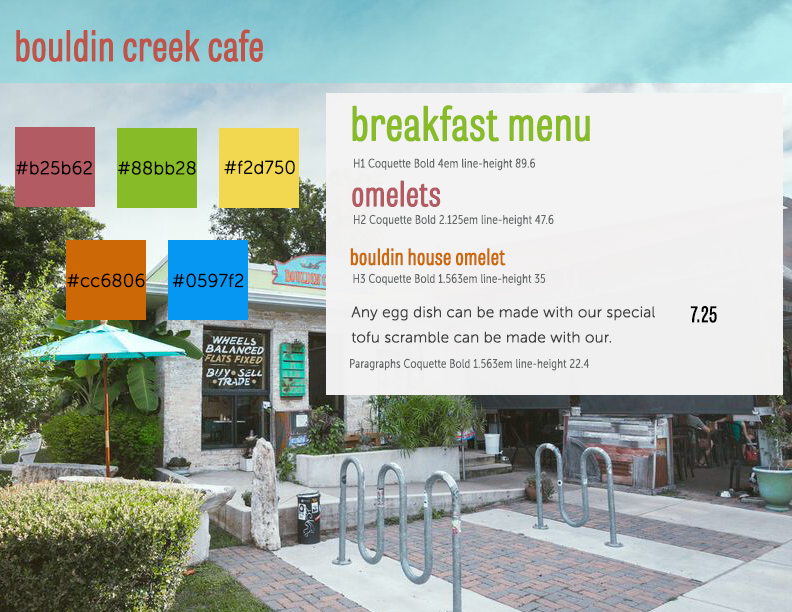
<style>
.page{position:relative;width:792px;height:612px}
.page>*{position:absolute;margin:0}
.t1{font:41px "TabletGothicCompressed-Light";letter-spacing:0.01em;color:#bf544b;font-weight:bold}
.t2{font:46px "TabletGothicCompressed-Light";letter-spacing:0.01em;color:#88bb28;font-weight:bold}
.t3{font:18px "MuseoSansRounded-100";letter-spacing:0.01em;color:#000000;font-weight:bold}
.t4{font:12px "MuseoSansCond-100";letter-spacing:0.01em;color:#646869;font-weight:bold}
.t5{font:34px "TabletGothicCompressed-Light";letter-spacing:0.01em;color:#b25b62;font-weight:bold}
.t6{font:22px "TabletGothicCompressed-Light";letter-spacing:0.01em;color:#cc6806;font-weight:bold}
.t7{font:15px/25.2px "MuseoSansRounded-100";letter-spacing:0.01em;color:#424242;font-weight:bold}
.t8{font:21px "TabletGothicCompressed-Light";letter-spacing:0.01em;color:#000000;font-weight:bold}
</style>
<div class="page">
<p class="t1" style="left:16px;top:29px;width:247px;height:33px">bouldin creek cafe</p>
<p class="t2" style="left:352px;top:105px;width:238px;height:37px">breakfast menu</p>
<p class="t3" style="left:16px;top:161px;width:76px;height:14px">#b25b62</p>
<p class="t3" style="left:118px;top:161px;width:78px;height:14px">#88bb28</p>
<p class="t3" style="left:224px;top:160px;width:71px;height:15px">#f2d750</p>
<p class="t4" style="left:354px;top:158px;width:181px;height:13px">H1 Coquette Bold 4em line-height 89.6</p>
<p class="t5" style="left:352px;top:180px;width:89px;height:27px">omelets</p>
<p class="t4" style="left:354px;top:214px;width:200px;height:13px">H2 Coquette Bold 2.125em line-height 47.6</p>
<p class="t6" style="left:350px;top:248px;width:156px;height:18px">bouldin house omelet</p>
<p class="t3" style="left:67px;top:273px;width:78px;height:15px">#cc6806</p>
<p class="t3" style="left:172px;top:273px;width:72px;height:15px">#0597f2</p>
<p class="t4" style="left:353px;top:273px;width:193px;height:13px">H3 Coquette Bold 1.563em line-height 35</p>
<p class="t7" style="left:351px;top:306px;width:304px;height:37px">Any egg dish can be made with our special<br>tofu scramble can be made with our.</p>
<p class="t8" style="left:690px;top:306px;width:27px;height:17px">7.25</p>
<p class="t4" style="left:350px;top:358px;width:239px;height:13px">Paragraphs Coquette Bold 1.563em line-height 22.4</p>
</div>
